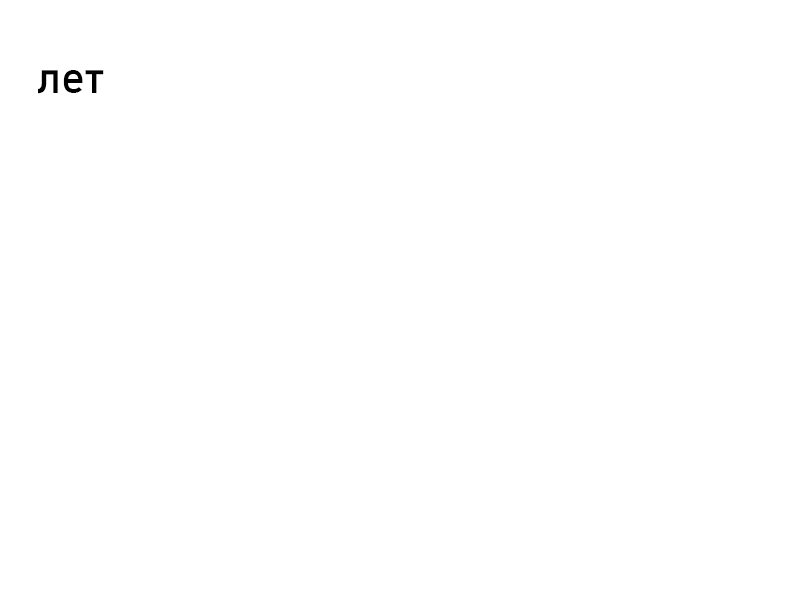
<style>
.page{position:relative;width:800px;height:600px;background:#ffffff}
.page>*{position:absolute;margin:0}
.t1{font:45px "Bahnschrift";color:#000000}
</style>
<div class="page">
<p class="t1" style="left:38px;top:70px;width:66px;height:24px">лет</p>
</div>
